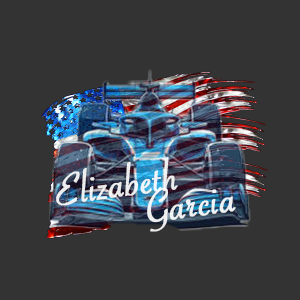
<style>
.page{position:relative;width:300px;height:300px;background:#333333}
.page>*{position:absolute;margin:0}
.t1{font:46.9px "SavoyeLetPlain";color:#ffffff;font-weight:bold}
.t2{font:48.2px "SavoyeLetPlain";color:#ffffff;font-weight:bold}
</style>
<div class="page">
<p class="t1" style="left:56px;top:156px;width:122px;height:50px;rotate:-8deg;opacity:0.88">Elizabeth</p>
<p class="t2" style="left:147px;top:187px;width:89px;height:45px;rotate:-8deg;opacity:0.9">Garcia</p>
</div>
